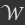
<style>
.page{position:relative;width:25px;height:25px;background:#333333}
.page>*{position:absolute;margin:0}
.t1{font:18px "LucidaCalligraphy-Italic";color:#dddddd}
</style>
<div class="page">
<p class="t1" style="left:1px;top:5px;width:23px;height:15px">W</p>
</div>
